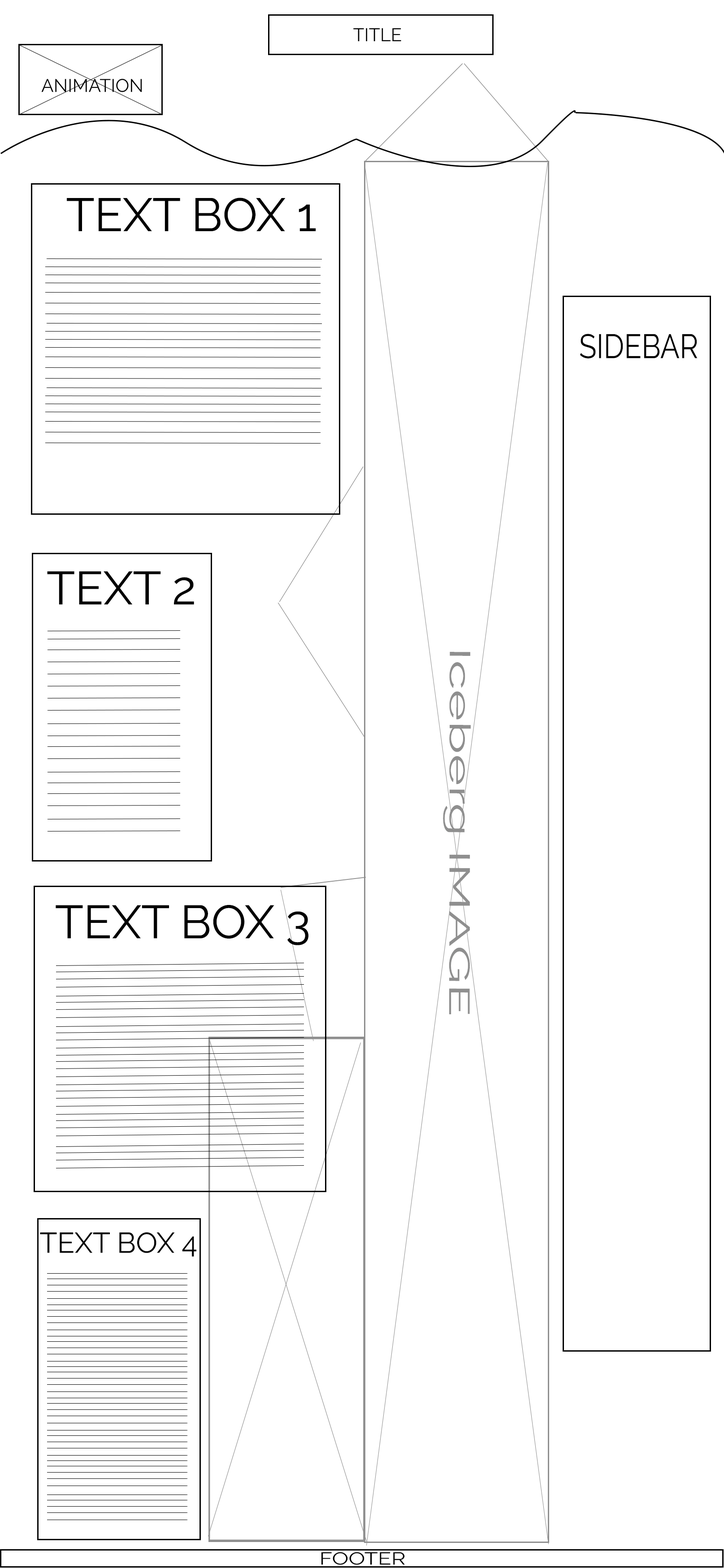
<style>
.page{position:relative;width:724px;height:1568px;background:#ffffff}
.page>*{position:absolute;margin:0}
.t1{font:18.4px "Raleway-Regular";color:#000000}
.t2{font:46.6px "Raleway-Regular";color:#000000}
.t3{font:33.9px "Raleway-Regular";color:#000000;scale:0.85 1}
.t4{font:28.7px "Raleway-Regular";color:#8f8f8f;scale:1.88 1}
.t5{font:28.7px "Raleway-Regular";color:#000000}
.t6{font:17.5px "Raleway-Regular";color:#000000;scale:1.26 1}
</style>
<div class="page">
<p class="t1" style="left:353px;top:28px;width:48px;height:13px">TITLE</p>
<p class="t1" style="left:41px;top:79px;width:101px;height:13px">ANIMATION</p>
<p class="t2" style="left:67px;top:198px;width:249px;height:34px">TEXT BOX 1</p>
<p class="t3" style="left:579px;top:334px;width:118px;height:24px">SIDEBAR</p>
<p class="t2" style="left:47px;top:571px;width:147px;height:34px">TEXT 2</p>
<p class="t4" style="left:443px;top:652px;width:27px;height:362px;rotate:90deg">Iceberg IMAGE</p>
<p class="t2" style="left:56px;top:905px;width:252px;height:40px">TEXT BOX 3</p>
<p class="t5" style="left:40px;top:1232px;width:156px;height:25px">TEXT BOX 4</p>
<p class="t6" style="left:321px;top:1552px;width:84px;height:13px">FOOTER</p>
</div>
